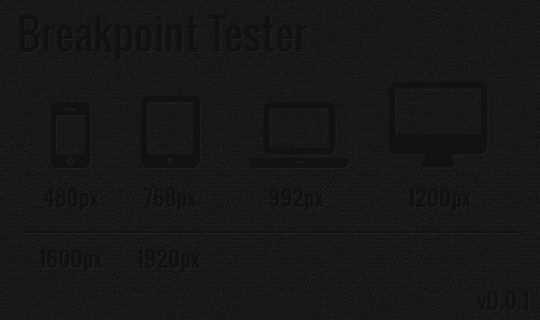
<style>
.page{position:relative;width:540px;height:320px}
.page>*{position:absolute;margin:0}
.t1{font:42px "Oswald-Regular";color:#111111}
.t2{font:22px "Oswald-Bold";color:#111111}
</style>
<div class="page">
<p class="t1" style="left:19px;top:15px;width:290px;height:45px">Breakpoint Tester</p>
<p class="t2" style="left:43px;top:188px;width:56px;height:23px">480px</p>
<p class="t2" style="left:144px;top:188px;width:53px;height:23px">768px</p>
<p class="t2" style="left:268px;top:188px;width:56px;height:23px">992px</p>
<p class="t2" style="left:408px;top:188px;width:63px;height:23px">1200px</p>
<p class="t2" style="left:39px;top:249px;width:64px;height:23px">1600px</p>
<p class="t2" style="left:137px;top:249px;width:63px;height:23px">1920px</p>
<p class="t2" style="left:477px;top:291px;width:52px;height:19px">v0.0.1</p>
</div>
